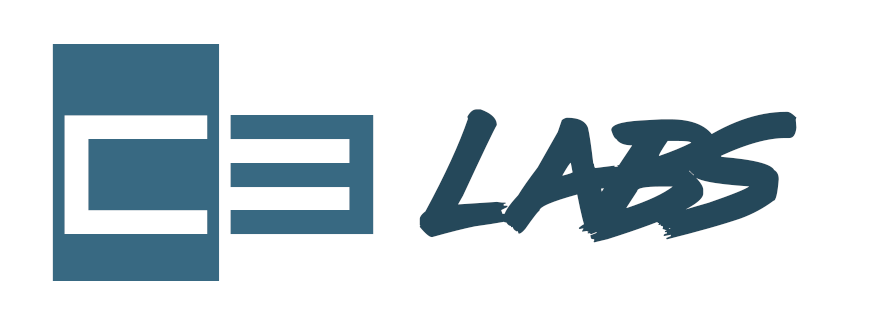
<style>
.page{position:relative;width:877px;height:326px;background:#ffffff}
.page>*{position:absolute;margin:0}
.t1{font:200px "UnsteadyOversteer-Regular";color:#386982}
.t2{font:144px "lazer84";color:#25485a}
</style>
<div class="page">
<p class="t1" style="left:52px;top:44px;width:322px;height:237px">c3</p>
<p class="t2" style="left:419px;top:109px;width:378px;height:134px">labs</p>
</div>
